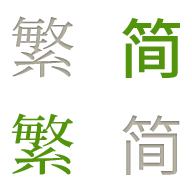
<style>
.page{position:relative;width:192px;height:192px;background:#ffffff}
.page>*{position:absolute;margin:0}
.t1{font:65.5px "KozMinPro-Regular";color:#a7a294}
.t2{font:65.5px "SourceHanSans-Medium";color:#52940c}
.t3{font:65.5px "KozMinPro-Medium";color:#52940c}
.t4{font:65.5px "SourceHanSans-Normal";color:#bcb7a7}
</style>
<div class="page">
<p class="t1" style="left:12px;top:16px;width:62px;height:62px">繁</p>
<p class="t2" style="left:122px;top:17px;width:58px;height:61px">简</p>
<p class="t3" style="left:11px;top:113px;width:63px;height:62px">繁</p>
<p class="t4" style="left:122px;top:115px;width:58px;height:60px">简</p>
</div>
